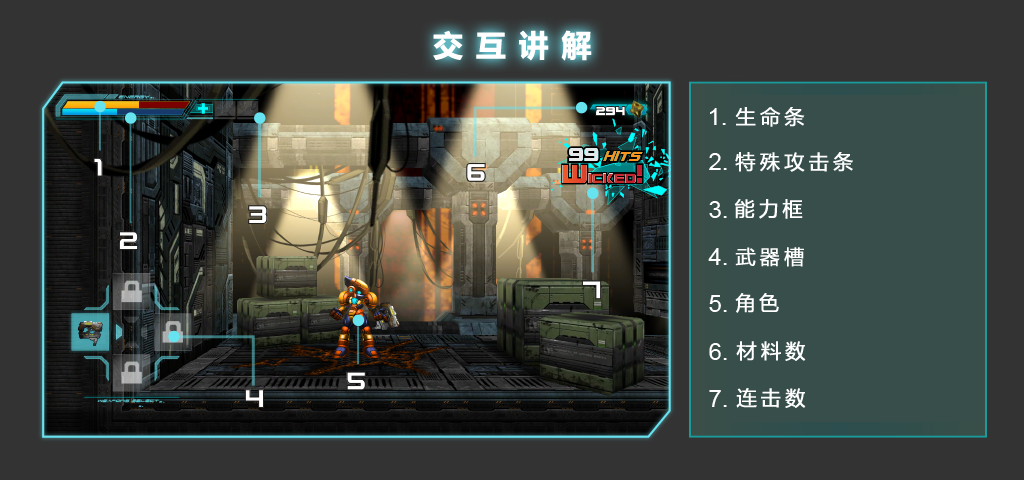
<style>
.page{position:relative;width:1024px;height:480px;background:#333333}
.page>*{position:absolute;margin:0}
.t1{font:30px "MicrosoftYaHei-Bold";letter-spacing:0.4em;color:#ffffff;font-weight:bold}
.t2{font:20px "MicrosoftYaHei";letter-spacing:0.2em;color:#ffffff;font-weight:bold}
</style>
<div class="page">
<p class="t1" style="left:433px;top:30px;width:159px;height:31px">交互讲解</p>
<p class="t2" style="left:735px;top:107px;width:70px;height:20px">生命条</p>
<p class="t2" style="left:735px;top:152px;width:118px;height:20px">特殊攻击条</p>
<p class="t2" style="left:734px;top:199px;width:69px;height:20px">能力框</p>
<p class="t2" style="left:735px;top:247px;width:69px;height:20px">武器槽</p>
<p class="t2" style="left:735px;top:293px;width:44px;height:20px">角色</p>
<p class="t2" style="left:736px;top:341px;width:70px;height:20px">材料数</p>
<p class="t2" style="left:736px;top:388px;width:70px;height:20px">连击数</p>
</div>
